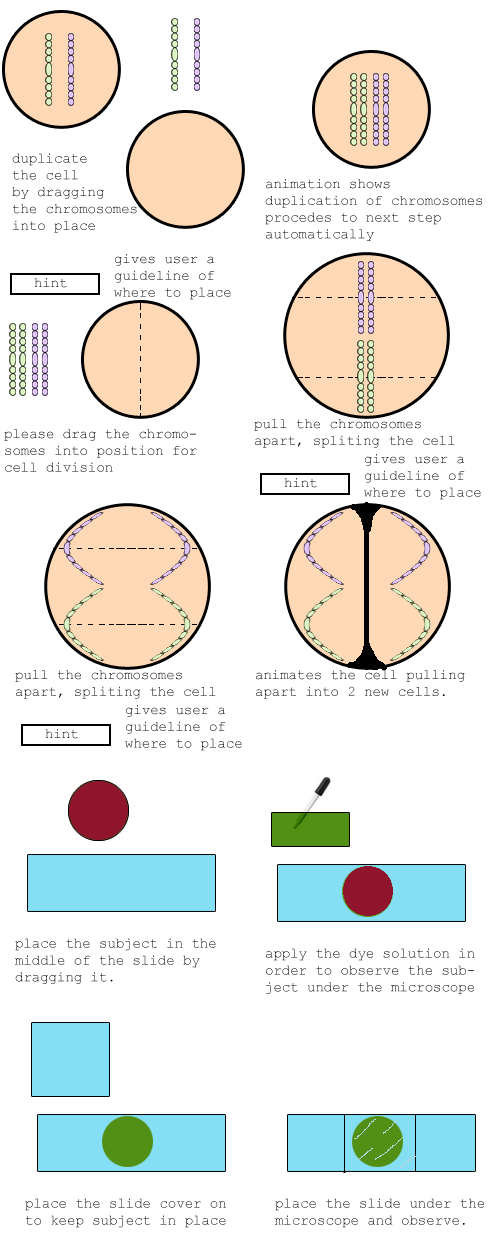
<style>
.page{position:relative;width:500px;height:1250px;background:#ffffff}
.page>*{position:absolute;margin:0}
.t1{font:14px "CourierNewPSMT"}
.t2{font:14px "CourierNewPSMT";color:#000000}
</style>
<div class="page">
<p class="t1" style="left:12px;top:153px;width:125px;height:80px">duplicate<br>the cell<br>by dragging<br>the chromosomes<br>into place</p>
<p class="t1" style="left:265px;top:179px;width:217px;height:62px">animation shows<br>duplication of chromosomes<br>procedes to next step<br>automatically</p>
<p class="t1" style="left:114px;top:254px;width:117px;height:46px">gives user a <br>guideline of<br>where to place</p>
<p class="t1" style="left:34px;top:278px;width:33px;height:10px">hint</p>
<p class="t2" style="left:254px;top:419px;width:201px;height:29px">pull the chromosomes apart, spliting the cell</p>
<p class="t1" style="left:4px;top:429px;width:193px;height:43px">please drag the chromosomes into position for cell division</p>
<p class="t1" style="left:364px;top:454px;width:117px;height:46px">gives user a <br>guideline of<br>where to place</p>
<p class="t1" style="left:284px;top:478px;width:33px;height:10px">hint</p>
<p class="t2" style="left:15px;top:670px;width:201px;height:29px">pull the chromosomes apart, spliting the cell</p>
<p class="t2" style="left:256px;top:670px;width:209px;height:29px">animates the cell pulling apart into 2 new cells.</p>
<p class="t1" style="left:125px;top:705px;width:117px;height:46px">gives user a <br>guideline of<br>where to place</p>
<p class="t1" style="left:45px;top:729px;width:33px;height:10px">hint</p>
<p class="t2" style="left:15px;top:938px;width:201px;height:46px">place the subject in the middle of the slide by dragging it.</p>
<p class="t1" style="left:266px;top:948px;width:209px;height:46px">apply the dye solution in order to observe the subject under the microscope</p>
<p class="t1" style="left:25px;top:1198px;width:201px;height:30px">place the slide cover on to keep subject in place</p>
<p class="t1" style="left:275px;top:1198px;width:209px;height:30px">place the slide under the microscope and observe.</p>
</div>
